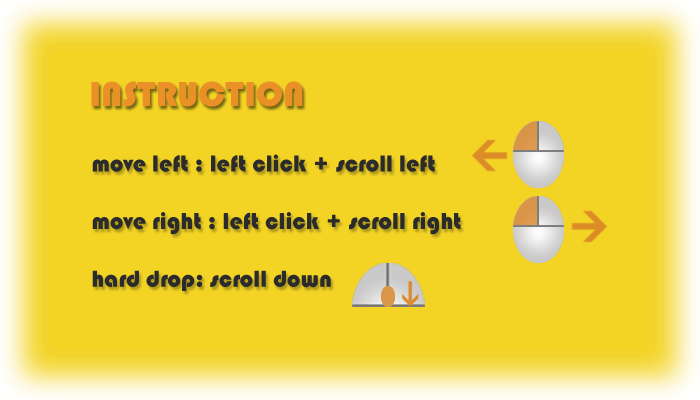
<style>
.page{position:relative;width:700px;height:400px;background:#f3d425}
.page>*{position:absolute;margin:0}
.t1{font:36px "Bauhaus93";color:#eb9027}
.t2{font:24px "Bauhaus93";color:#2b2b2b}
</style>
<div class="page">
<p class="t1" style="left:91px;top:81px;width:212px;height:26px">INSTRUCTION</p>
<p class="t2" style="left:92px;top:154px;width:369px;height:137px">move left : left click + scroll left<br><br>move right : left click + scroll right<br><br>hard drop: scroll down</p>
</div>
